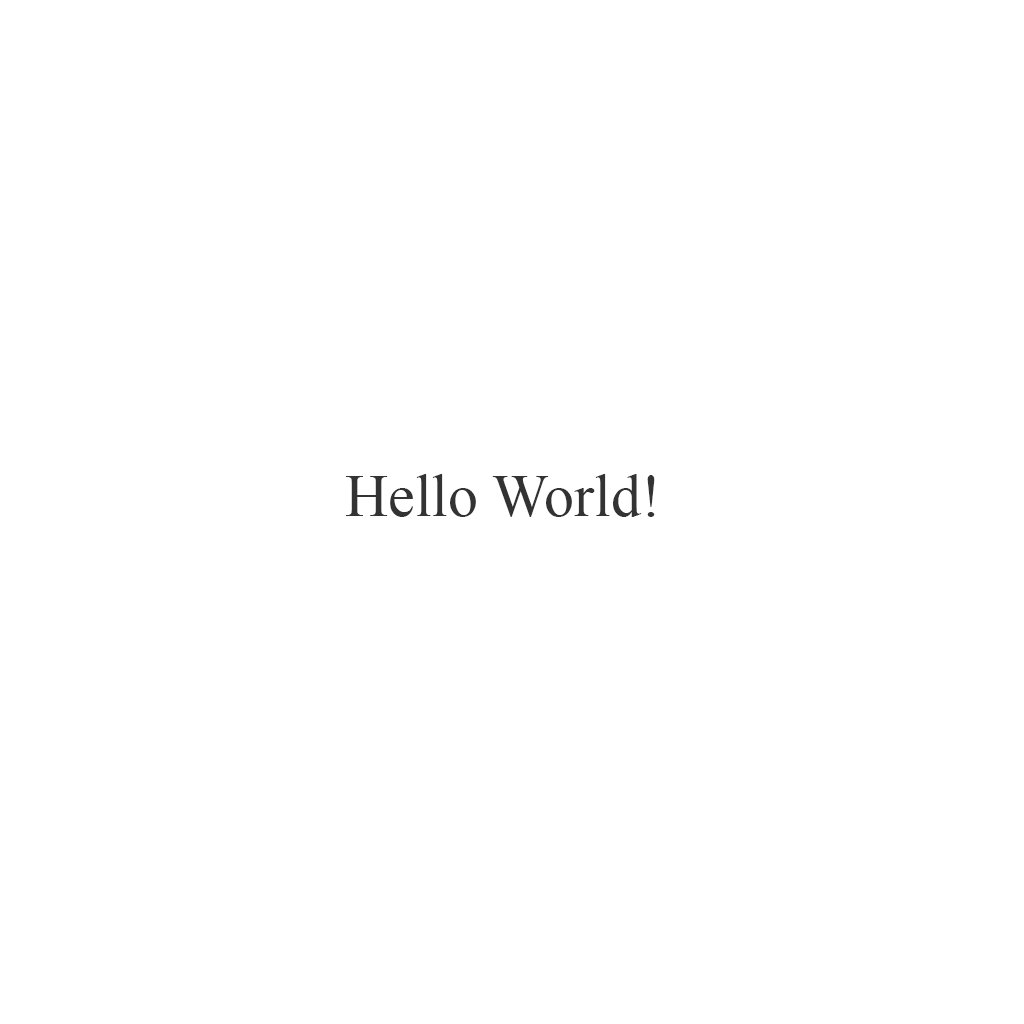
<style>
.page{position:relative;width:1024px;height:1024px;background:#ffffff}
.page>*{position:absolute;margin:0}
.t1{font:60px "TimesNewRomanPSMT";color:#333333}
</style>
<div class="page">
<p class="t1" style="left:346px;top:474px;width:309px;height:43px">Hello World!</p>
</div>
